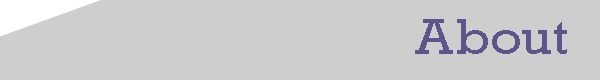
<style>
.page{position:relative;width:600px;height:80px;background:#cecece}
.page>*{position:absolute;margin:0}
.t1{font:50.9px "Rockwell";letter-spacing:0.005em;color:#5b568b;scale:1.09 1}
</style>
<div class="page">
<p class="t1" style="left:415px;top:19px;width:152px;height:35px">About</p>
</div>
